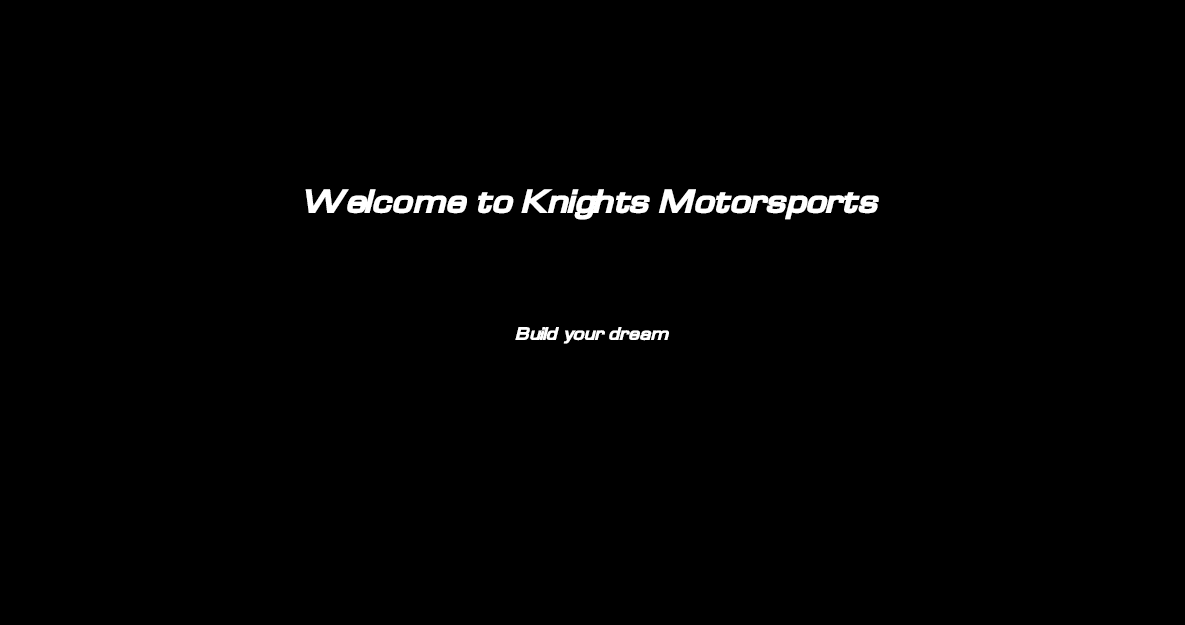
<style>
.page{position:relative;width:1185px;height:625px;background:#000000}
.page>*{position:absolute;margin:0}
.t1{font:35.3px "WaukeganLDOExtendedBlack-Oblique";color:#ffffff}
.t2{font:19.3px "WaukeganLDOExtendedBlack-Oblique";color:#ffffff}
</style>
<div class="page">
<p class="t1" style="left:305px;top:189px;width:574px;height:31px">Welcome to Knights Motorsports</p>
<p class="t2" style="left:515px;top:327px;width:154px;height:17px">Build your dream</p>
</div>
